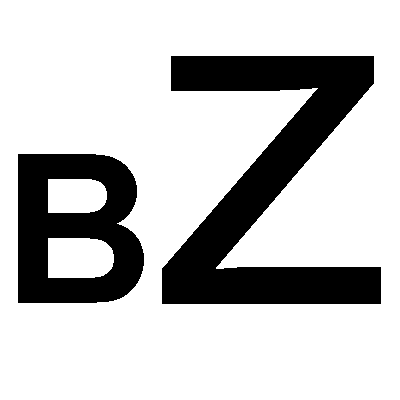
<style>
.page{position:relative;width:400px;height:400px;background:#ffffff}
.page>*{position:absolute;margin:0}
.t1{font:208.3px "Arial-BoldMT";color:#000000}
.t2{font:475px "ArialMT";color:#000000}
</style>
<div class="page">
<p class="t1" style="left:18px;top:56px;width:363px;height:248px">B<span class="t2">z</span></p>
</div>
